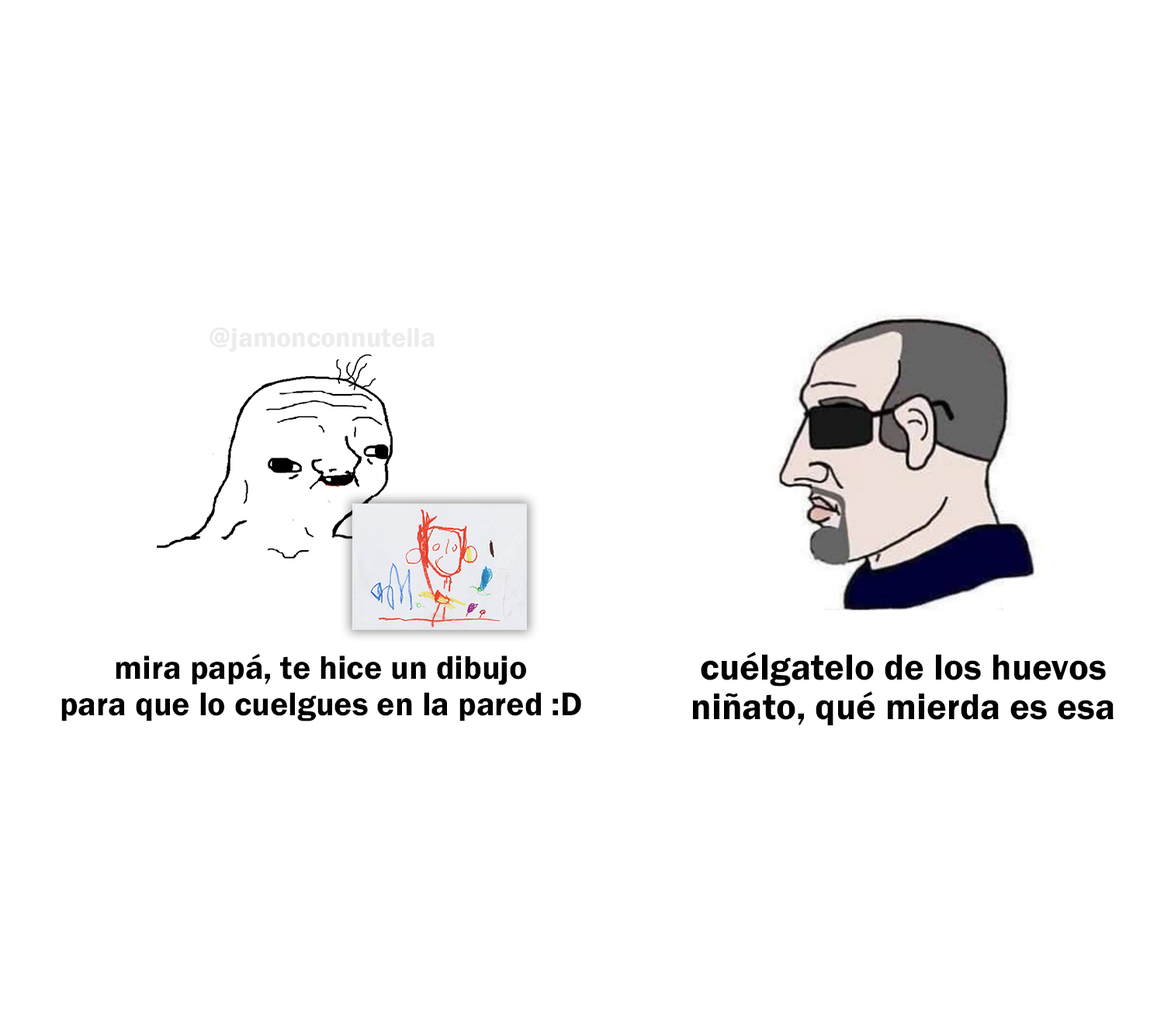
<style>
.page{position:relative;width:1164px;height:1024px;background:#ffffff}
.page>*{position:absolute;margin:0}
.t1{font:27.9px "FranklinGothic-Demi";color:#ececec}
.t2{font:34px "FranklinGothic-Demi";color:#000000}
.t3{font:37.7px "FranklinGothic-Demi";color:#000000}
</style>
<div class="page">
<p class="t1" style="left:210px;top:327px;width:225px;height:25px">@jamonconnutella</p>
<p class="t2" style="left:61px;top:653px;width:520px;height:69px;text-align:center">mira papá, te hice un dibujo<br>para que lo cuelgues en la pared :D</p>
<p class="t3" style="left:693px;top:652px;width:421px;height:74px;text-align:center">cuélgatelo de los huevos<br>niñato, qué mierda es esa</p>
</div>
